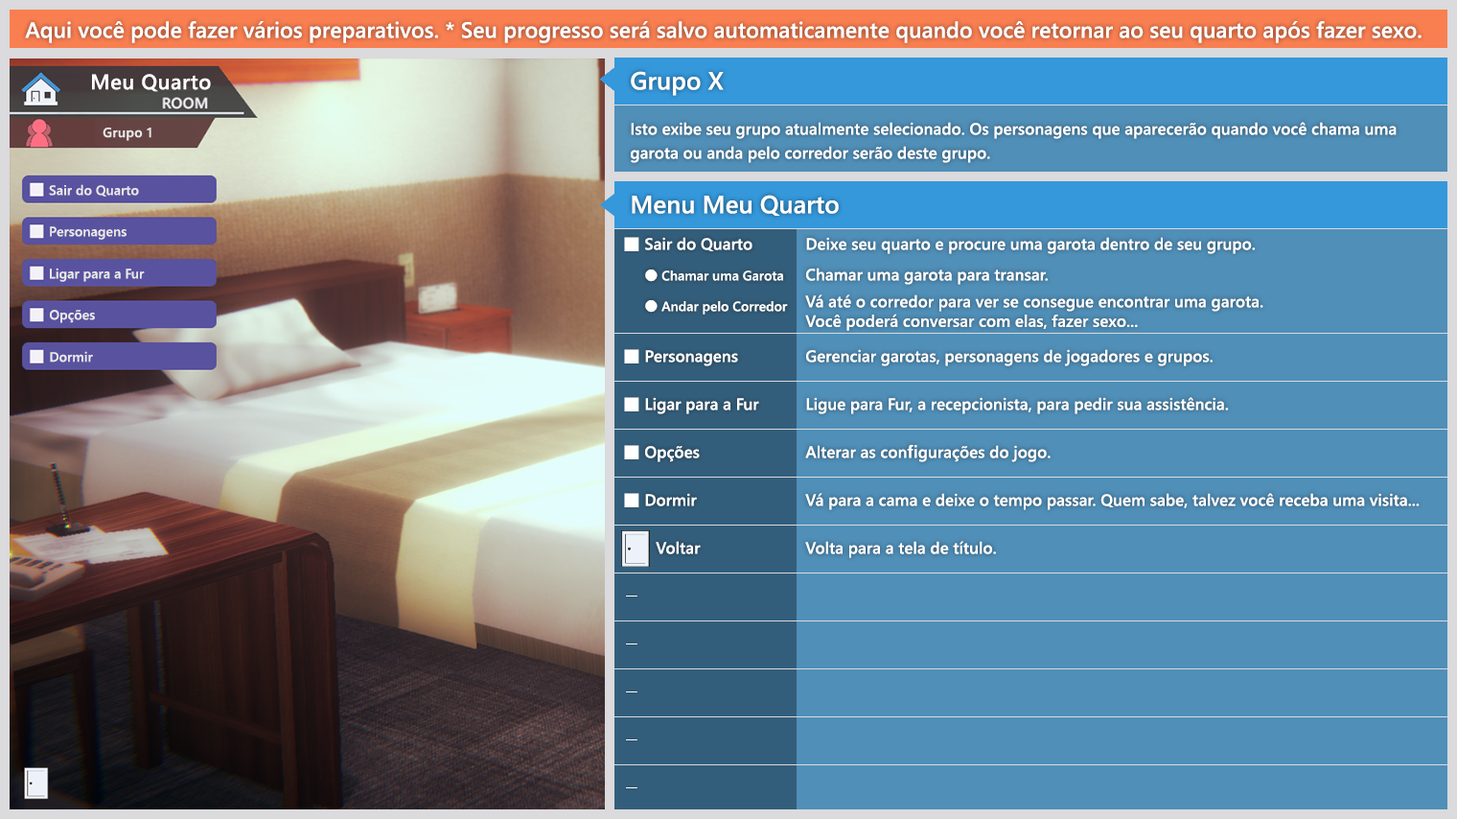
<style>
.page{position:relative;width:1457px;height:819px;background:#508fb8}
.page>*{position:absolute;margin:0}
.t1{font:22px "YuGothicUI-Semibold";color:#ffffff}
.t2{font:21.1px "YuGothicUI-Semibold";letter-spacing:0.025em;color:#ffffff}
.t3{font:24.9px "YuGothicUI-Semibold";color:#ffffff}
.t4{font:16.3px/24px "YuGothicUI-Semibold";color:#ffffff}
.t5{font:13.4px "YuGothicUI-Semibold";letter-spacing:0.025em;color:#eae8e8}
.t6{font:13.4px "YuGothicUI-Semibold";letter-spacing:0.005em;color:#eae8e8}
.t7{font:13.4px/30.7px "YuGothicUI-Semibold";color:#ffffff}
.t8{font:16.3px/30.7px "YuGothicUI-Semibold";color:#ffffff}
.t9{font:16.3px/26.8px "YuGothicUI-Semibold";color:#ffffff}
.t10{font:16.3px "YuGothicUI-Semibold";color:#ffffff}
</style>
<div class="page">
<p class="t1" style="left:25px;top:21px;width:1396px;height:22px">Aqui você pode fazer vários preparativos. * Seu progresso será salvo automaticamente quando você retornar ao seu quarto após fazer sexo.</p>
<p class="t2" style="left:92px;top:74px;width:119px;height:18px">Meu Quarto</p>
<p class="t3" style="left:631px;top:71px;width:93px;height:25px">Grupo X</p>
<p class="t4" style="left:631px;top:122px;width:765px;height:41px">Isto exibe seu grupo atualmente selecionado. Os personagens que aparecerão quando você chama uma<br>garota ou anda pelo corredor serão deste grupo.</p>
<p class="t5" style="left:103px;top:127px;width:48px;height:14px">Grupo 1</p>
<p class="t6" style="left:49px;top:184px;width:90px;height:12px">Sair do Quarto</p>
<p class="t3" style="left:632px;top:195px;width:207px;height:21px">Menu Meu Quarto</p>
<p class="t6" style="left:50px;top:226px;width:77px;height:14px">Personagens</p>
<p class="t7" style="left:645px;top:237px;width:143px;height:77px"><span class="t8">Sair do Quarto<br></span>● Chamar uma Garota<br>● Andar pelo Corredor</p>
<p class="t8" style="left:805px;top:237px;width:458px;height:94px">Deixe seu quarto e procure uma garota dentro de seu grupo.<br>Chamar uma garota para transar.<br><span class="t9">Vá até o corredor para ver se consegue encontrar uma garota.<br></span><span class="t10">Você poderá conversar com elas, fazer sexo...</span></p>
<p class="t6" style="left:50px;top:267px;width:95px;height:15px">Ligar para a Fur</p>
<p class="t6" style="left:50px;top:310px;width:45px;height:13px">Opções</p>
<p class="t6" style="left:50px;top:351px;width:43px;height:11px">Dormir</p>
<p class="t10" style="left:645px;top:350px;width:93px;height:16px">Personagens</p>
<p class="t10" style="left:806px;top:349px;width:406px;height:17px">Gerenciar garotas, personagens de jogadores e grupos.</p>
<p class="t10" style="left:645px;top:397px;width:114px;height:17px">Ligar para a Fur</p>
<p class="t10" style="left:806px;top:397px;width:423px;height:17px">Ligue para Fur, a recepcionista, para pedir sua assistência.</p>
<p class="t10" style="left:645px;top:446px;width:55px;height:16px">Opções</p>
<p class="t10" style="left:805px;top:444px;width:245px;height:18px">Alterar as configurações do jogo.</p>
<p class="t10" style="left:645px;top:493px;width:52px;height:13px">Dormir</p>
<p class="t10" style="left:805px;top:493px;width:614px;height:17px">Vá para a cama e deixe o tempo passar. Quem sabe, talvez você receba uma visita...</p>
<p class="t10" style="left:656px;top:541px;width:45px;height:13px">Voltar</p>
<p class="t10" style="left:805px;top:541px;width:191px;height:17px">Volta para a tela de título.</p>
</div>
